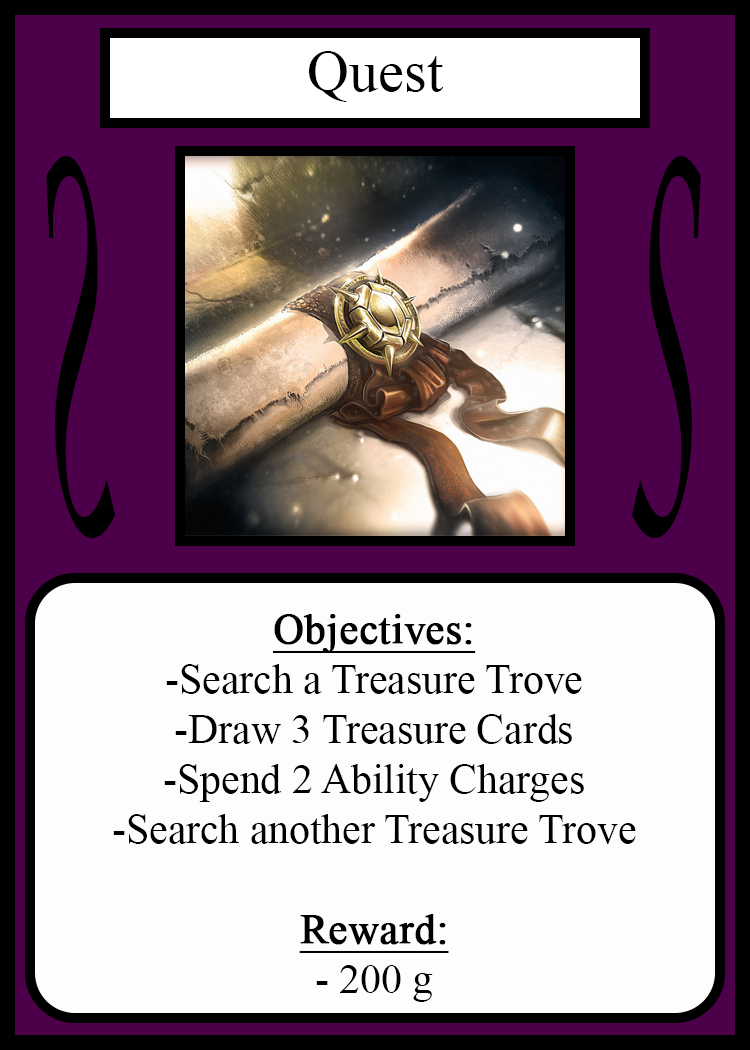
<style>
.page{position:relative;width:750px;height:1050px;background:#fffcfc}
.page>*{position:absolute;margin:0}
.t1{font:58.3px "TimesNewRomanPSMT";color:#010101}
.t2{font:504.3px "LucidaCalligraphy-Italic";color:#000000;scale:0.24 1}
.t3{font:504.1px "LucidaCalligraphy-Italic";color:#000000;scale:0.24 1}
.t4{font:41.7px "TimesNewRomanPSMT";color:#000000}
.t5{font:41.7px "TimesNewRomanPSMT";color:#000000;font-weight:bold;text-decoration:underline}
</style>
<div class="page">
<p class="t1" style="left:309px;top:51px;width:135px;height:51px">Quest</p>
<p class="t2" style="left:46px;top:156px;width:70px;height:382px;rotate:180deg">S</p>
<p class="t3" style="left:631px;top:156px;width:70px;height:382px">S</p>
<p class="t4" style="left:113px;top:614px;width:523px;height:388px;text-align:center"><span class="t5">Objectives:<br></span>-Search a Treasure Trove<br>-Draw 3 Treasure Cards<br>-Spend 2 Ability Charges<br>-Search another Treasure Trove<br><br><span class="t5">Reward:</span><br>- 200 g</p>
</div>
